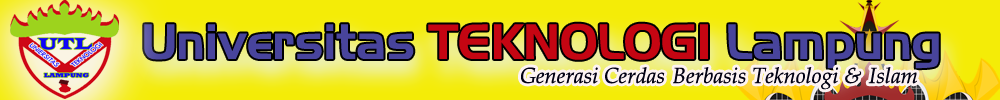
<style>
.page{position:relative;width:1000px;height:100px;background:#f4ec07}
.page>*{position:absolute;margin:0}
.t1{font:48px "Newtown";color:#48449c}
.t2{font:48px "Newtown";color:#c50512}
.t3{font:22px "QueensParkItalic";color:#020113}
</style>
<div class="page">
<p class="t1" style="left:144px;top:23px;width:795px;height:46px">Universitas <span class="t2">TEKNOLOGI</span> Lampung</p>
<p class="t3" style="left:521px;top:67px;width:396px;height:23px">Generasi Cerdas  Berbasis Teknologi &amp;  Islam</p>
</div>
